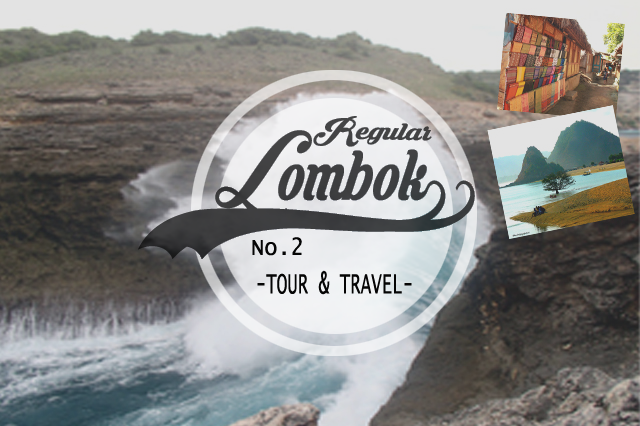
<style>
.page{position:relative;width:640px;height:426px}
.page>*{position:absolute;margin:0}
.t1{font:29.9px "KrinkesDecorPERSONALUSE";color:#434344;scale:1.26 1}
.t2{font:89.7px "KrinkesDecorPERSONALUSE";color:#3d3e3f;scale:0.79 1}
.t3{font:23.8px "LucidaConsole";color:#050505;scale:0.92 1}
.t4{font:30.6px "LucidaConsole";color:#050505;scale:0.57 1}
</style>
<div class="page">
<p class="t1" style="left:313px;top:116px;width:119px;height:31px;rotate:1deg">Regular</p>
<p class="t2" style="left:138px;top:130px;width:337px;height:129px">Lombok00</p>
<p class="t3" style="left:252px;top:237px;width:50px;height:19px">No.2</p>
<p class="t4" style="left:257px;top:270px;width:155px;height:25px">-TOUR &amp; TRAVEL-</p>
</div>
